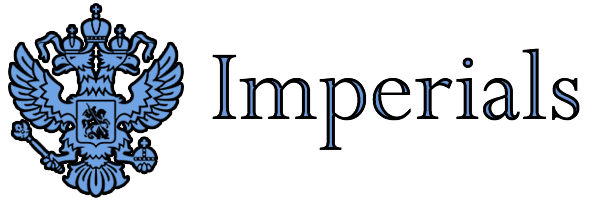
<style>
.page{position:relative;width:600px;height:200px;background:#ffffff}
.page>*{position:absolute;margin:0}
.t1{font:111.1px "Perpetua";color:#000000}
</style>
<div class="page">
<p class="t1" style="left:212px;top:48px;width:368px;height:102px">Imperials</p>
</div>
